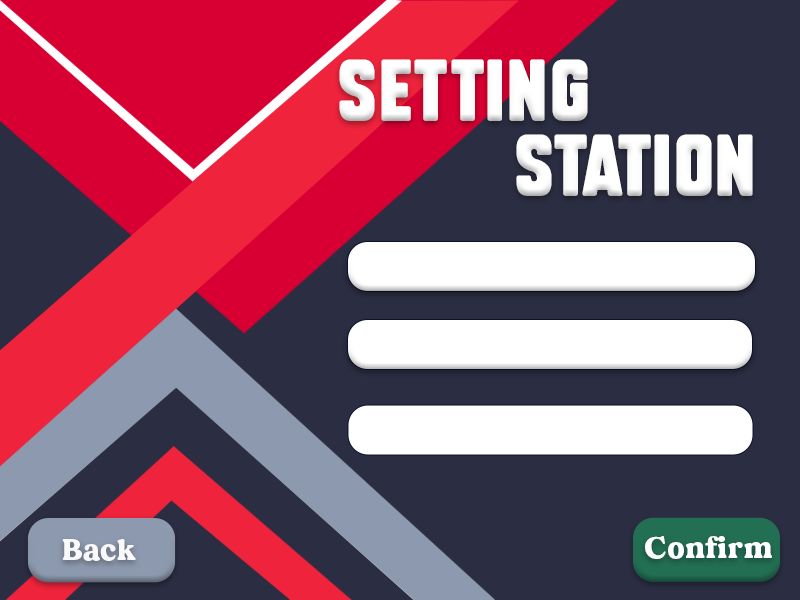
<style>
.page{position:relative;width:800px;height:600px;background:#2b2d42}
.page>*{position:absolute;margin:0}
.t1{font:60px "SubtleCurves";letter-spacing:0.025em;color:#ffffff}
.t2{font:30px "MADEDillan";letter-spacing:0.025em;color:#f9f9f9}
.t3{font:30px "MADEDillan";letter-spacing:0.025em;color:#ffffff}
</style>
<div class="page">
<p class="t1" style="left:339px;top:59px;width:249px;height:62px">setting</p>
<p class="t1" style="left:516px;top:134px;width:237px;height:62px">Station</p>
<p class="t2" style="left:62px;top:539px;width:74px;height:22px">Back</p>
<p class="t3" style="left:645px;top:536px;width:127px;height:23px">Confirm</p>
</div>
